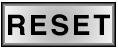
<style>
.page{position:relative;width:118px;height:48px;background:#000000}
.page>*{position:absolute;margin:0}
.t1{font:28px "Helvetica-Bold";letter-spacing:0.1em;color:#000000}
</style>
<div class="page">
<p class="t1" style="left:8px;top:14px;width:102px;height:22px">RESET</p>
</div>
